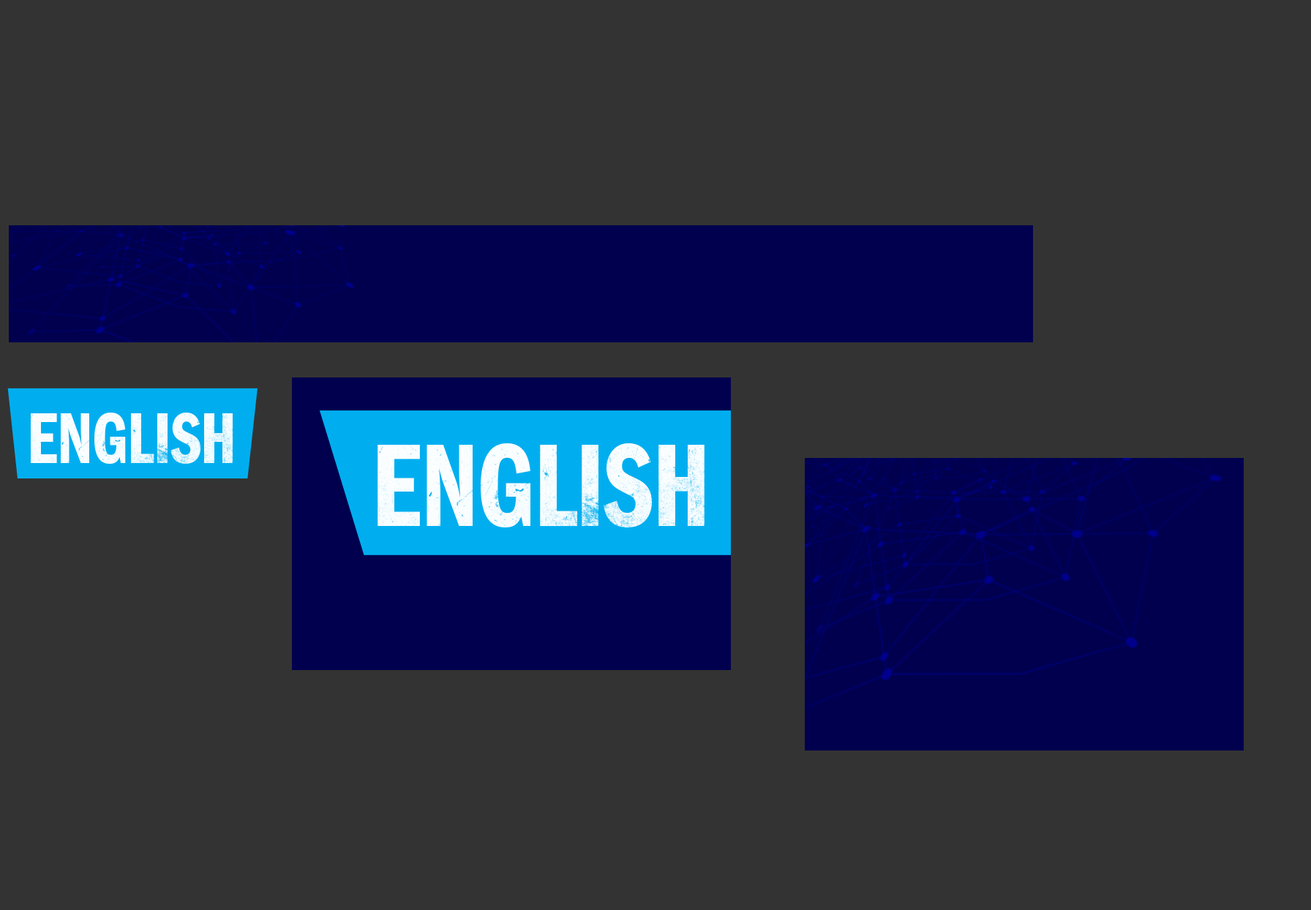
<style>
.page{position:relative;width:1311px;height:910px;background:#333333}
.page>*{position:absolute;margin:0}
.t1{font:75px "ITCFranklinGothicStd-DmCp";letter-spacing:-0.01em;color:#ffffff}
.t2{font:121.4px "ITCFranklinGothicStd-DmCp";letter-spacing:-0.01em;color:#ffffff}
</style>
<div class="page">
<p class="t1" style="left:31px;top:412px;width:202px;height:52px">ENGLISH</p>
<p class="t2" style="left:377px;top:442px;width:327px;height:86px">ENGLISH</p>
</div>
